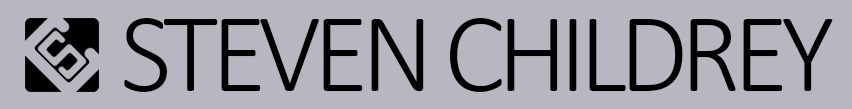
<style>
.page{position:relative;width:852px;height:109px;background:#bab6c1}
.page>*{position:absolute;margin:0}
.t1{font:114px "Calibri-Light";letter-spacing:-0.07em;color:#000000}
</style>
<div class="page">
<p class="t1" style="left:124px;top:18px;width:709px;height:74px">STEVEN CHILDREY</p>
</div>
